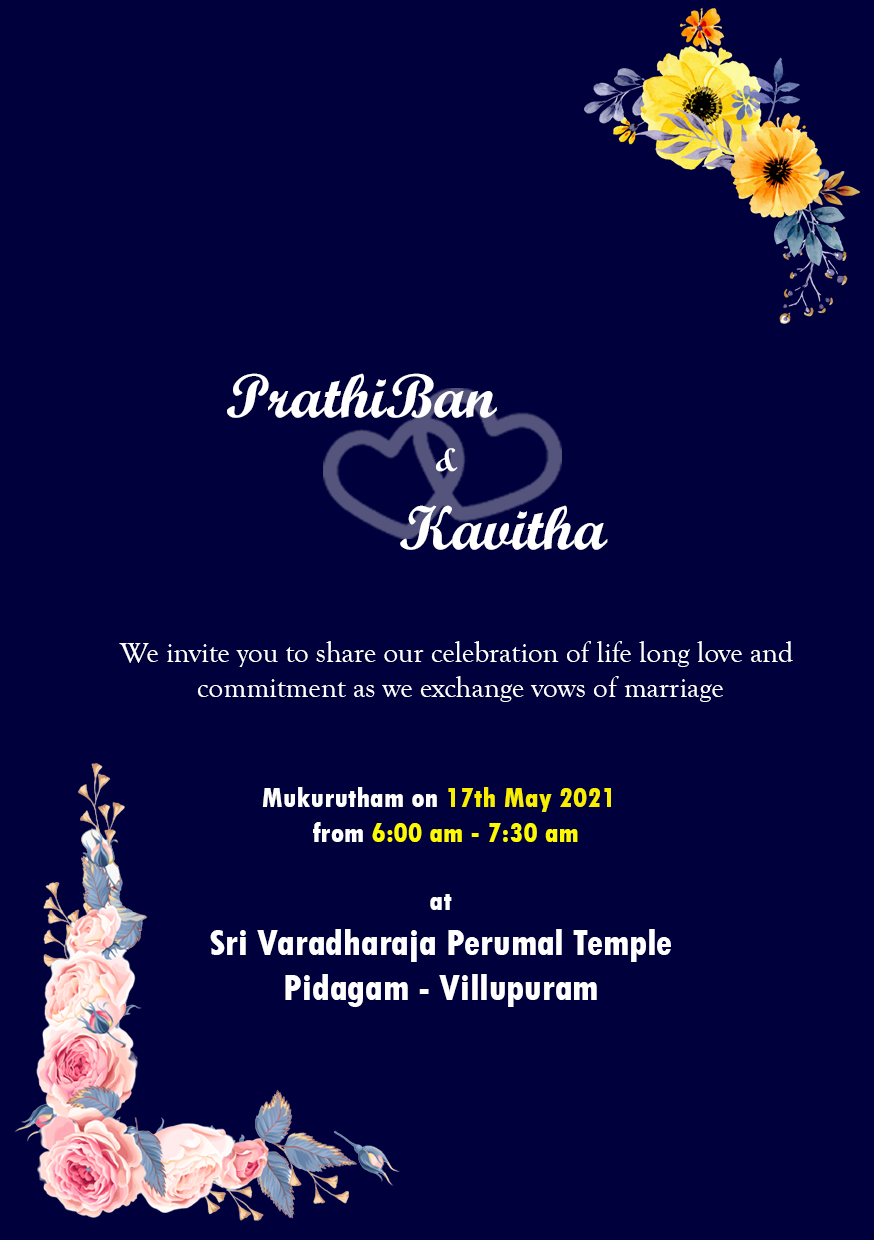
<style>
.page{position:relative;width:874px;height:1240px;background:#00003c}
.page>*{position:absolute;margin:0}
.t1{font:62.4px "ScriptMTBold";color:#ffffff}
.t2{font:33.3px "ScriptMTBold";color:#ffffff}
.t3{font:29.2px "GoudyOldStyleT-Regular";color:#ffffff}
.t4{font:29.2px "TwCenMT-CondensedExtraBold";color:#fdfa00}
.t5{font:29.2px "TwCenMT-CondensedExtraBold";color:#ffffff}
.t6{font:29.2px "TwCenMT-CondensedExtraBold";color:#f7ee00}
.t7{font:37.5px "TwCenMT-CondensedExtraBold";color:#ffffff}
</style>
<div class="page">
<p class="t1" style="left:227px;top:373px;width:270px;height:45px">PrathiBan</p>
<p class="t2" style="left:436px;top:448px;width:22px;height:24px">&amp;</p>
<p class="t1" style="left:400px;top:505px;width:208px;height:45px">Kavitha</p>
<p class="t3" style="left:119px;top:641px;width:674px;height:61px;text-align:center">We invite you to share our celebration of life long love and <br>commitment as we exchange vows of marriage</p>
<p class="t4" style="left:262px;top:787px;width:349px;height:55px;text-align:center"><span class="t5">Mukurutham on </span><span class="t6">17th May 2021  <br></span><span class="t5">from </span>6:00 am - 7:30 am</p>
<p class="t7" style="left:210px;top:894px;width:461px;height:113px;text-align:center"><span class="t5">at<br></span>Sri Varadharaja Perumal Temple<br>Pidagam - Villupuram</p>
</div>
